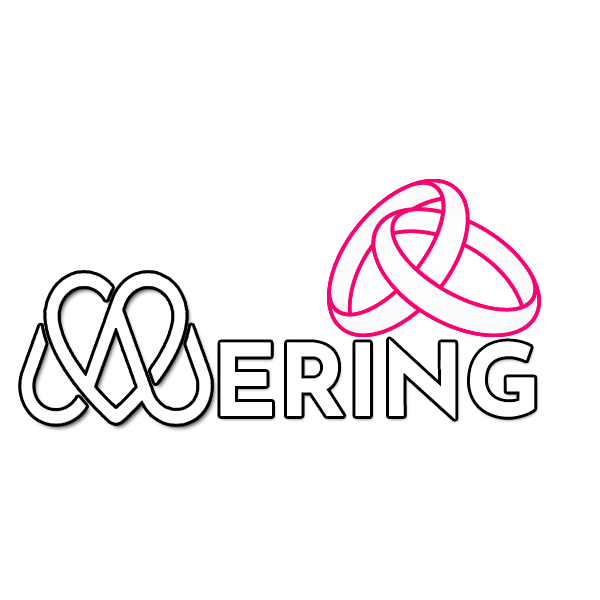
<style>
.page{position:relative;width:600px;height:600px;background:#ffffff}
.page>*{position:absolute;margin:0}
.t1{font:100px "JosefinSans-Bold";color:#ffffff}
</style>
<div class="page">
<p class="t1" style="left:220px;top:339px;width:315px;height:80px">ERING</p>
</div>
